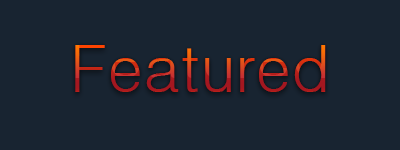
<style>
.page{position:relative;width:400px;height:150px;background:#182431}
.page>*{position:absolute;margin:0}
.t1{font:65px "Dotum";letter-spacing:-0.01em}
</style>
<div class="page">
<p class="t1" style="left:75px;top:45px;width:251px;height:47px">Featured</p>
</div>
